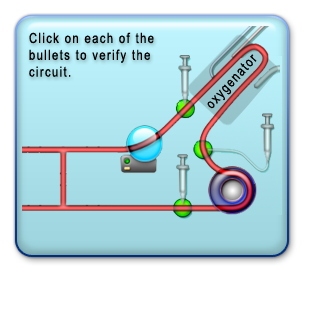
<style>
.page{position:relative;width:320px;height:320px;background:#ffffff}
.page>*{position:absolute;margin:0}
.t1{font:14px "ArialMT";letter-spacing:0.1em;color:#000000;scale:0.8 1}
</style>
<div class="page">
<p class="t1" style="left:29px;top:32px;width:125px;height:45px">Click on each of the <br>bullets to verify the <br>circuit.</p>
<p class="t1" style="left:207px;top:54px;width:50px;height:55px;rotate:-47deg">oxygenator</p>
</div>
